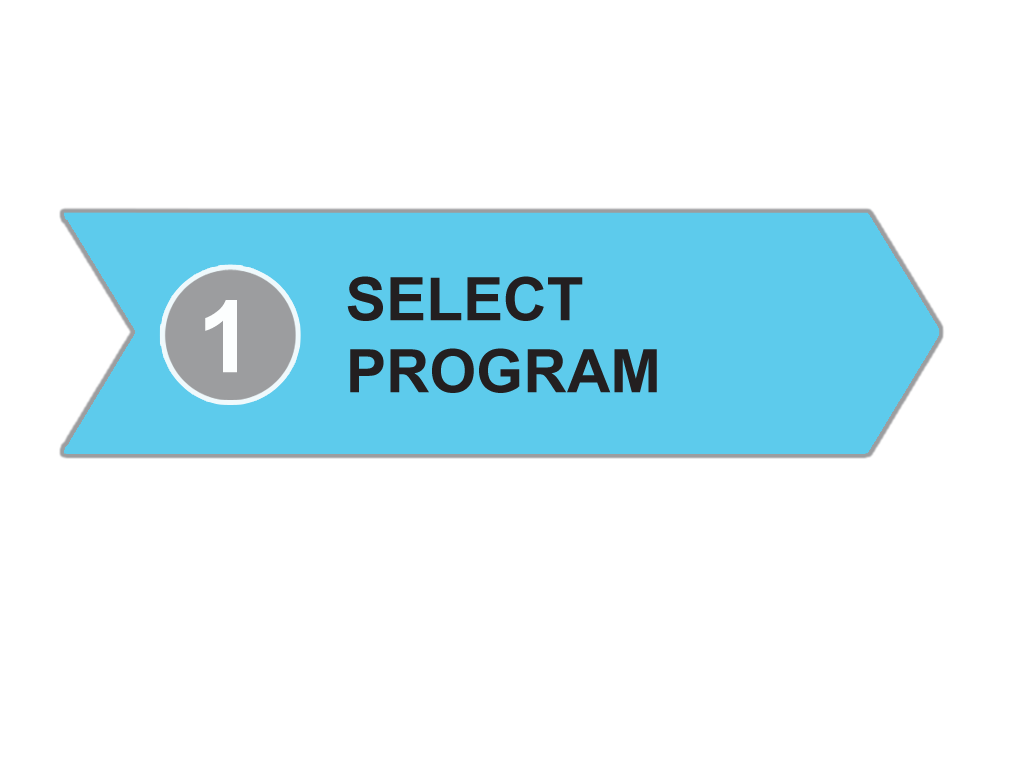
<style>
.page{position:relative;width:1024px;height:768px;background:#ffffff}
.page>*{position:absolute;margin:0}
.t1{font:60px "Arial-BoldMT";color:#231f20}
.t2{font:100px "Arial-BoldMT";color:#fcfefe}
</style>
<div class="page">
<p class="t1" style="left:347px;top:276px;width:310px;height:117px">SELECT <br>PROGRAM</p>
<p class="t2" style="left:205px;top:300px;width:32px;height:73px">1</p>
</div>
